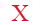
<style>
.page{position:relative;width:40px;height:25px;background:#ffffff}
.page>*{position:absolute;margin:0}
.t1{font:24px "TimesNewRomanPSMT";color:#db152c}
</style>
<div class="page">
<p class="t1" style="left:11px;top:5px;width:18px;height:16px">X</p>
</div>
